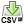
<style>
.page{position:relative;width:24px;height:24px;background:#ffffff}
.page>*{position:absolute;margin:0}
.t1{font:7.5px "Arial-BoldMT";color:#010101}
</style>
<div class="page">
<p class="t1" style="left:1px;top:17px;width:16px;height:6px">CSV</p>
</div>
